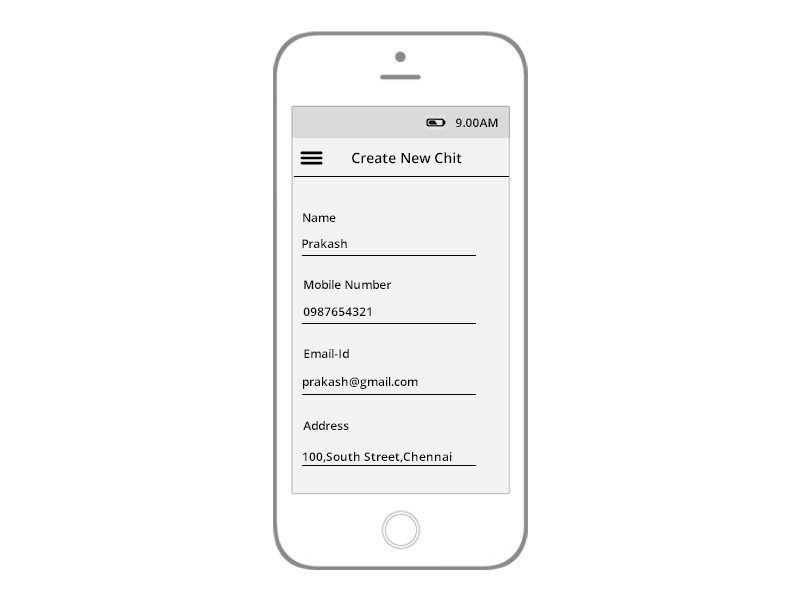
<style>
.page{position:relative;width:800px;height:600px;background:#ffffff}
.page>*{position:absolute;margin:0}
.t1{font:12px "OpenSans-Semibold";color:#030303}
.t2{font:14px "OpenSans-Semibold";color:#030303}
</style>
<div class="page">
<p class="t1" style="left:456px;top:118px;width:42px;height:9px">9.00AM</p>
<p class="t2" style="left:352px;top:152px;width:110px;height:12px">Create New Chit</p>
<p class="t1" style="left:303px;top:213px;width:33px;height:9px">Name</p>
<p class="t1" style="left:302px;top:239px;width:45px;height:9px">Prakash</p>
<p class="t1" style="left:304px;top:280px;width:88px;height:9px">Mobile Number</p>
<p class="t1" style="left:303px;top:307px;width:68px;height:9px">0987654321</p>
<p class="t1" style="left:304px;top:349px;width:45px;height:9px">Email-Id</p>
<p class="t1" style="left:303px;top:377px;width:115px;height:12px">prakash@gmail.com</p>
<p class="t1" style="left:303px;top:421px;width:46px;height:9px">Address</p>
<p class="t1" style="left:303px;top:452px;width:149px;height:11px">100,South Street,Chennai</p>
</div>
